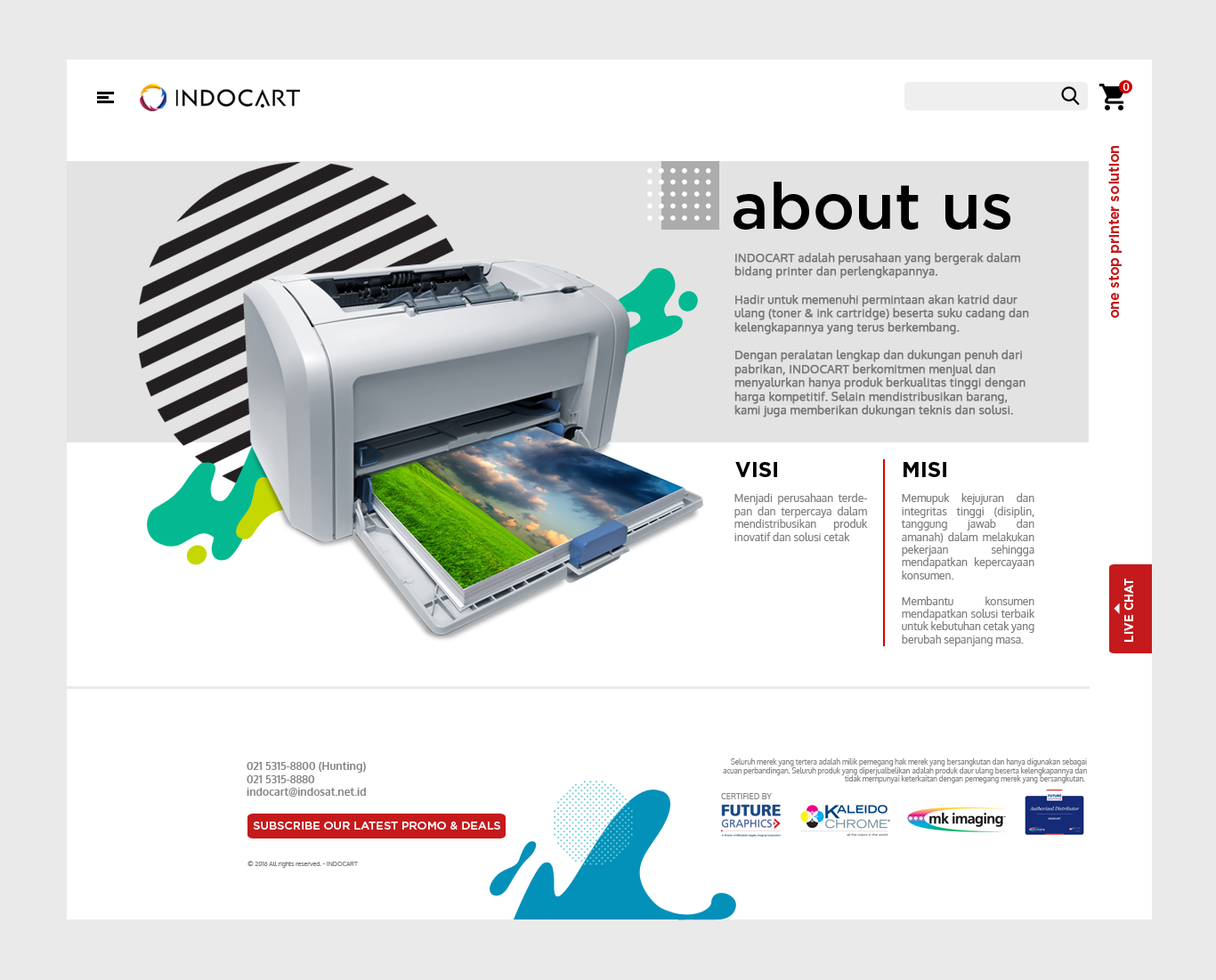
<style>
.page{position:relative;width:1216px;height:980px;background:#ffffff}
.page>*{position:absolute;margin:0}
.t1{font:10.7px "Oxygen-Bold";color:#ffffff}
.t2{font:14px "Gotham-Bold";color:#c41a1c}
.t3{font:64.1px "Gotham-Medium";color:#000000}
.t4{font:11.6px "Oxygen-Regular";color:#767676;font-weight:bold}
.t5{font:21.4px "Gotham-Bold";color:#000000}
.t6{font:10.7px "Oxygen-Regular";color:#7c7c7c}
.t7{font:11.7px "Gotham-Bold";color:#ffffff;text-transform:uppercase}
.t8{font:7.1px "Oxygen-Regular";color:#858585}
.t9{font:10.7px "Oxygen-Bold";color:#858585}
.t10{font:8.2px "Oxygen-Regular";color:#858585}
.t11{font:11.1px "Gotham-Medium";color:#ffffff;text-transform:uppercase}
.t12{font:6.2px "Oxygen-Regular";color:#858585}
</style>
<div class="page">
<p class="t1" style="left:1123px;top:83px;width:7px;height:8px">0</p>
<p class="t2" style="left:1109px;top:146px;width:13px;height:172px;rotate:-90deg">one stop printer solution</p>
<p class="t3" style="left:734px;top:182px;width:277px;height:48px">about us</p>
<p class="t4" style="left:735px;top:253px;width:294px;height:165px;text-align:justify">INDOCART adalah perusahaan yang bergerak dalam <br>bidang printer dan perlengkapannya. <br><br>Hadir untuk memenuhi permintaan akan katrid daur <br>ulang (toner &amp; ink cartridge) beserta suku cadang dan <br>kelengkapannya yang terus berkembang.<br><br>Dengan peralatan lengkap dan dukungan penuh dari <br>pabrikan, INDOCART berkomitmen menjual dan <br>menyalurkan hanya produk berkualitas tinggi dengan <br>harga kompetitif. Selain mendistribusikan barang, <br>kami juga memberikan dukungan teknis dan solusi.</p>
<p class="t5" style="left:735px;top:462px;width:42px;height:15px">VISI</p>
<p class="t5" style="left:904px;top:462px;width:43px;height:15px">MISI</p>
<p class="t6" style="left:735px;top:493px;width:133px;height:48px;text-align:justify">Menjadi perusahaan terdepan dan terpercaya dalam mendistribusikan produk inovatif dan solusi cetak</p>
<p class="t6" style="left:901px;top:493px;width:135px;height:153px;text-align:justify">Memupuk kejujuran dan integritas tinggi (disiplin, tanggung jawab dan amanah) dalam melakukan pekerjaan sehingga mendapatkan kepercayaan konsumen.<br><br>Membantu konsumen mendapatkan solusi terbaik untuk kebutuhan cetak yang berubah sepanjang masa.</p>
<p class="t7" style="left:1125px;top:579px;width:9px;height:63px;rotate:-90deg">LIVE CHAT</p>
<p class="t8" style="left:723px;top:759px;width:364px;height:25px;text-align:right">Seluruh merek yang tertera adalah milik pemegang hak merek yang bersangkutan dan hanya digunakan sebagai<br>acuan perbandingan. Seluruh produk yang diperjualbelikan adalah produk daur ulang beserta kelengkapannya dan<br> tidak mempunyai keterkaitan dengan pemegang merek yang bersangkutan.</p>
<p class="t9" style="left:247px;top:762px;width:119px;height:35px">021 5315-8800 (Hunting)<br>021 5315-8880<br>indocart@indosat.net.id</p>
<p class="t10" style="left:721px;top:793px;width:51px;height:7px">CERTIFIED BY</p>
<p class="t11" style="left:253px;top:822px;width:247px;height:8px">subscribe our latest promo &amp; deals</p>
<p class="t12" style="left:248px;top:861px;width:110px;height:7px">© 2016 All rights reserved. - INDOCART</p>
</div>
